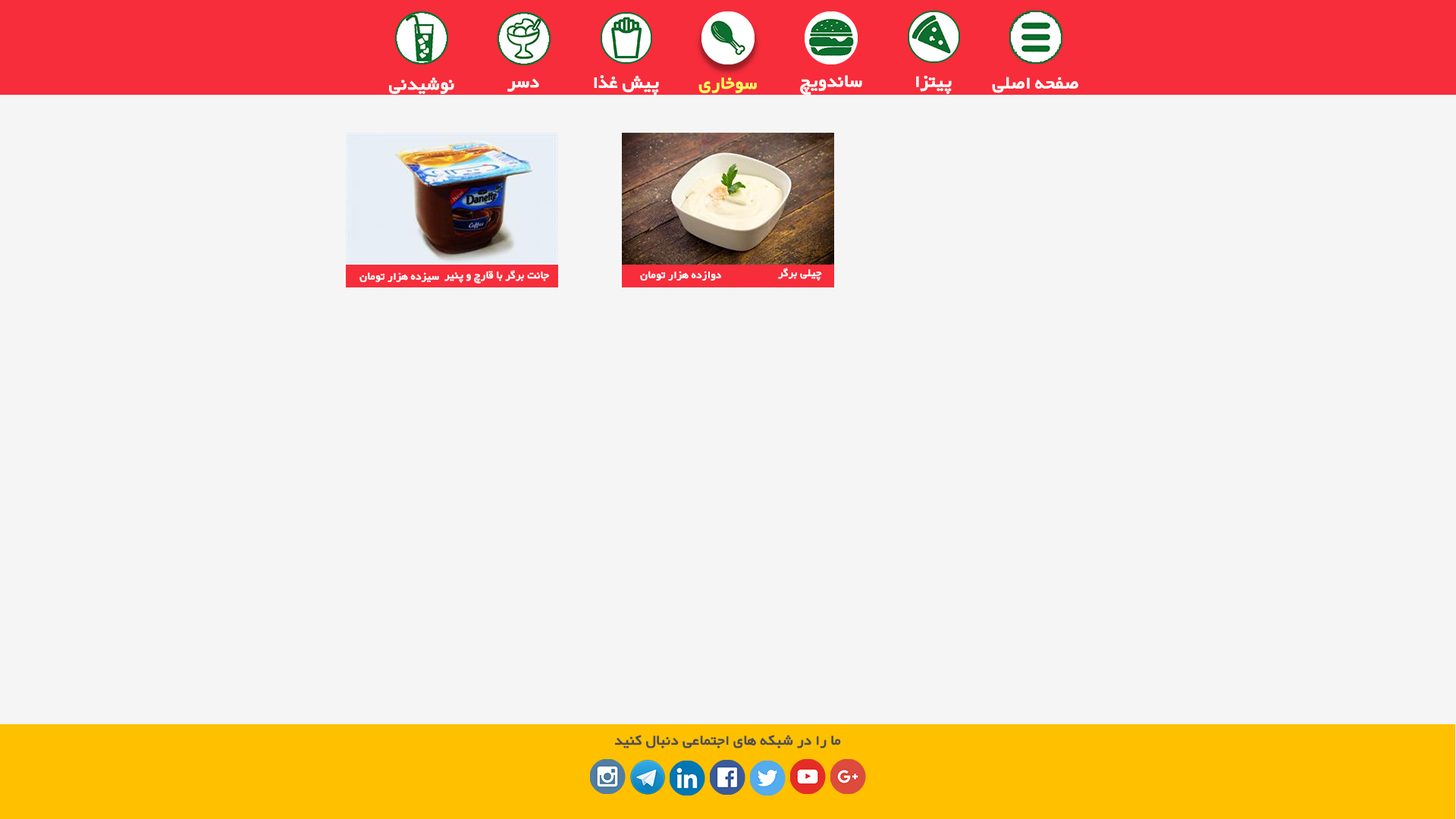
<style>
.page{position:relative;width:1456px;height:819px;background:#f5f5f5}
.page>*{position:absolute;margin:0}
.t1{font:22.7px "WyekanBold";color:#ffffff}
.t2{font:22.7px "WyekanBold";color:#fdff5d}
.t3{font:13.6px "WyekanBold";color:#ffffff}
.t4{font:18.4px "WyekanBold";color:#505050}
</style>
<div class="page">
<p class="t1" style="left:389px;top:77px;width:65px;height:17px">نوشیدنی</p>
<p class="t1" style="left:594px;top:75px;width:65px;height:20px">پیش غذا</p>
<p class="t2" style="left:698px;top:77px;width:59px;height:16px">سوخاری</p>
<p class="t1" style="left:800px;top:75px;width:62px;height:20px">ساندویچ</p>
<p class="t1" style="left:916px;top:75px;width:36px;height:19px">پیتزا</p>
<p class="t1" style="left:992px;top:77px;width:86px;height:16px">صفحه اصلی</p>
<p class="t1" style="left:507px;top:78px;width:32px;height:14px">دسر</p>
<p class="t3" style="left:444px;top:270px;width:105px;height:14px">جانت برگر با قارچ و پنیر</p>
<p class="t3" style="left:778px;top:268px;width:44px;height:13px">چیلی برگر</p>
<p class="t3" style="left:359px;top:272px;width:80px;height:10px">سیزده هزار تومان</p>
<p class="t3" style="left:640px;top:271px;width:81px;height:10px">دوازده هزار تومان</p>
<p class="t4" style="left:614px;top:735px;width:227px;height:13px">ما را در شبکه های اجتماعی دنبال کنید</p>
</div>
